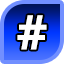
<style>
.page{position:relative;width:64px;height:64px}
.page>*{position:absolute;margin:0}
.t1{font:48px "DroidSans-Bold";letter-spacing:0.08em;color:#ffffff;text-transform:uppercase}
</style>
<div class="page">
<p class="t1" style="left:17px;top:15px;width:30px;height:35px">#</p>
</div>
